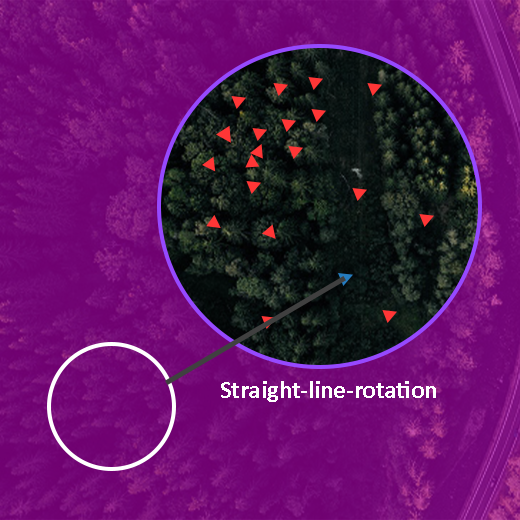
<style>
.page{position:relative;width:520px;height:520px}
.page>*{position:absolute;margin:0}
.t1{font:25px "Calibri-Bold";color:#ffffff}
</style>
<div class="page">
<p class="t1" style="left:221px;top:381px;width:215px;height:21px">Straight-line-rotation</p>
</div>
